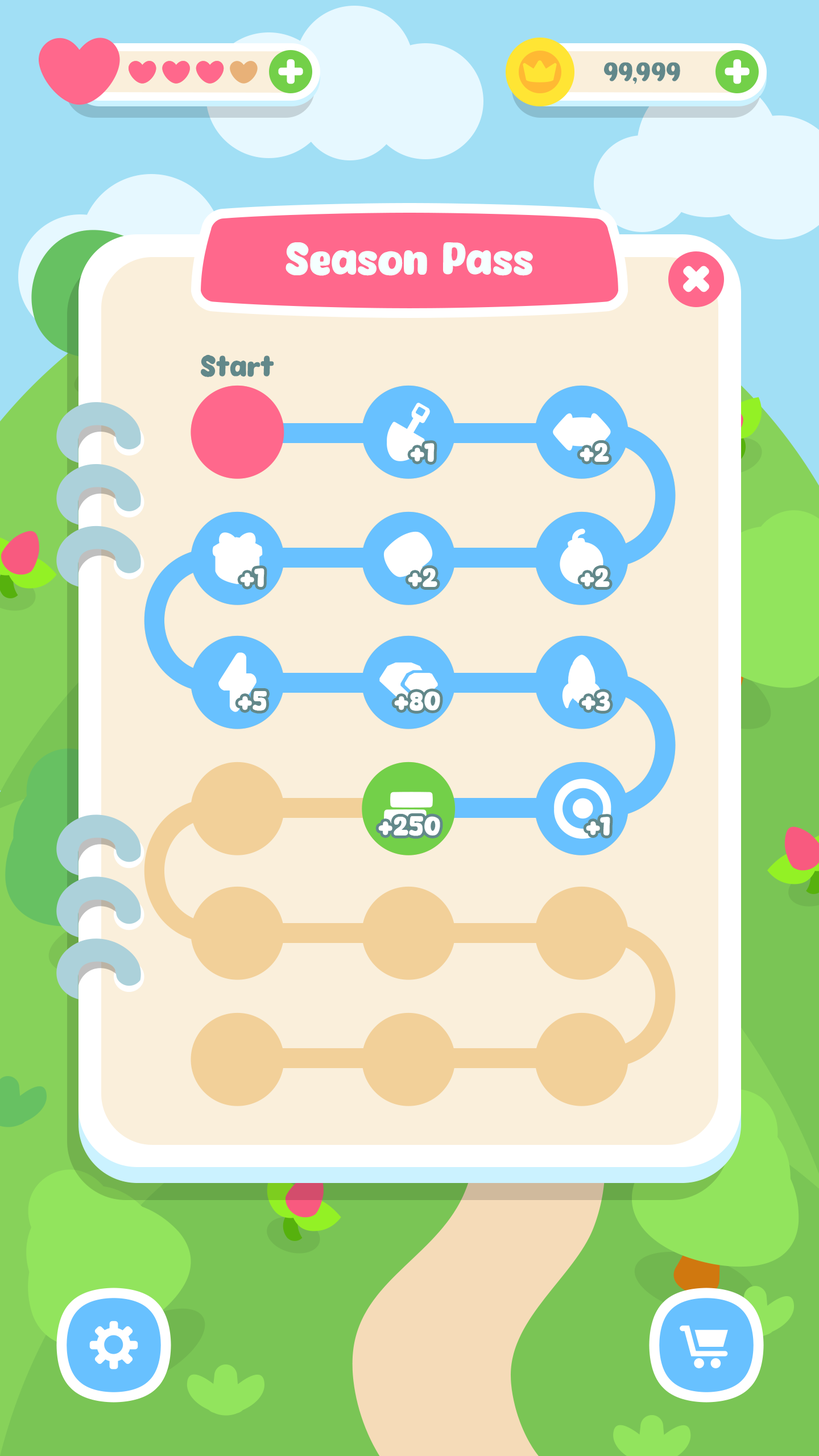
<style>
.page{position:relative;width:819px;height:1456px;background:#faefdb}
.page>*{position:absolute;margin:0}
.t1{font:43.8px "Eazy-Chat";color:#f5ffff}
.t2{font:28.4px "Eazy-Chat";color:#62888a}
.t3{font:25.6px "Eazy-Chat";color:#ffffff}
</style>
<div class="page">
<p class="t1" style="left:286px;top:242px;width:247px;height:34px">Season Pass</p>
<p class="t2" style="left:201px;top:355px;width:73px;height:22px">Start</p>
<p class="t3" style="left:410px;top:443px;width:25px;height:19px">+1</p>
<p class="t3" style="left:580px;top:442px;width:29px;height:20px">+2</p>
<p class="t3" style="left:240px;top:568px;width:24px;height:19px">+1</p>
<p class="t3" style="left:408px;top:568px;width:29px;height:19px">+2</p>
<p class="t3" style="left:580px;top:568px;width:30px;height:19px">+2</p>
<p class="t3" style="left:238px;top:691px;width:29px;height:20px">+5</p>
<p class="t3" style="left:394px;top:691px;width:46px;height:20px">+80</p>
<p class="t3" style="left:581px;top:692px;width:29px;height:19px">+3</p>
<p class="t3" style="left:378px;top:816px;width:62px;height:20px">+250</p>
<p class="t3" style="left:586px;top:817px;width:24px;height:18px">+1</p>
</div>
